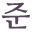
<style>
.page{position:relative;width:32px;height:32px;background:#ffffff}
.page>*{position:absolute;margin:0}
.t1{font:30px "NanumMyeongjoBold";color:#564558}
</style>
<div class="page">
<p class="t1" style="left:1px;top:2px;width:29px;height:27px">준</p>
</div>
